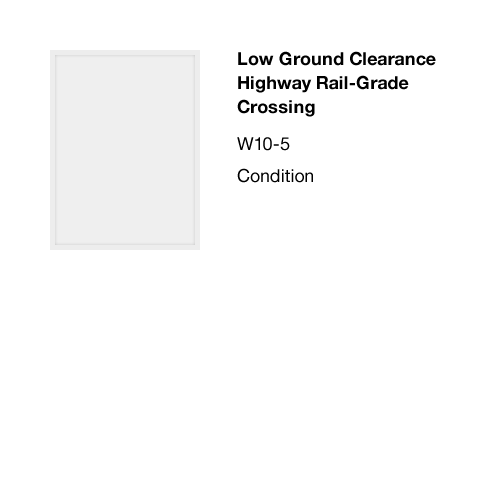
<style>
.page{position:relative;width:500px;height:490px;background:#ffffff}
.page>*{position:absolute;margin:0}
.t1{font:18px/24px "HelveticaNeue-Bold";color:#000000}
.t2{font:18px "HelveticaNeue";color:#000000}
</style>
<div class="page">
<p class="t1" style="left:237px;top:51px;width:199px;height:66px">Low Ground Clearance<br>Highway Rail-Grade <br>Crossing</p>
<p class="t2" style="left:237px;top:137px;width:53px;height:14px">W10-5</p>
<p class="t2" style="left:237px;top:168px;width:76px;height:15px">Condition</p>
</div>
